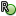
<style>
.page{position:relative;width:16px;height:16px;background:#ffffff}
.page>*{position:absolute;margin:0}
.t1{font:14px "LucidaConsole";color:#bbbaba}
</style>
<div class="page">
<p class="t1" style="left:2px;top:2px;width:6px;height:9px">R</p>
</div>
